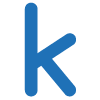
<style>
.page{position:relative;width:100px;height:100px;background:#ffffff}
.page>*{position:absolute;margin:0}
.t1{font:125px "Arciform";color:#1f71b7}
</style>
<div class="page">
<p class="t1" style="left:24px;top:2px;width:52px;height:95px">k</p>
</div>
